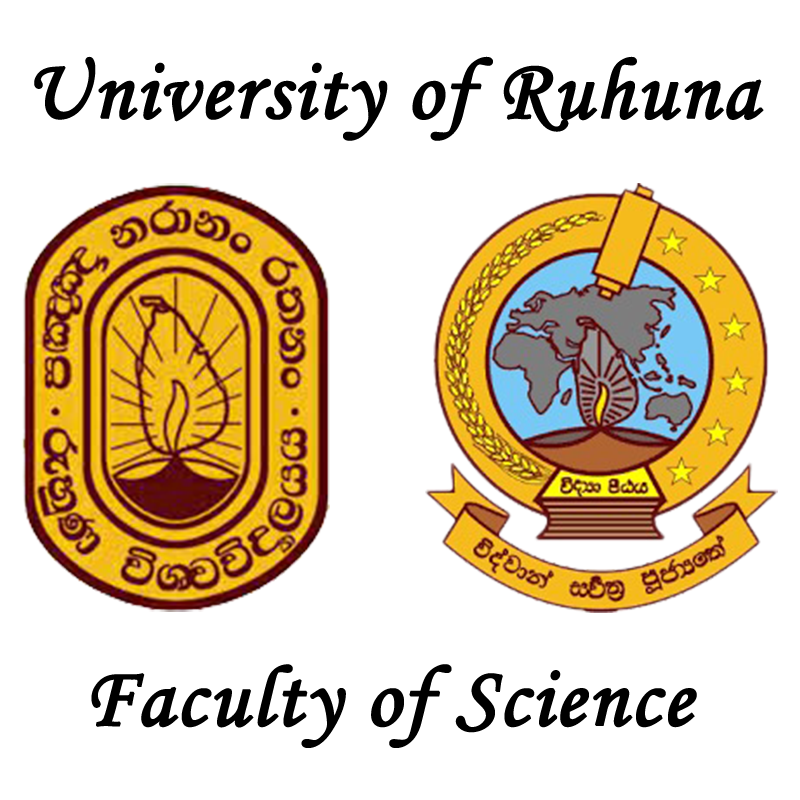
<style>
.page{position:relative;width:800px;height:800px;background:#ffffff}
.page>*{position:absolute;margin:0}
.t1{font:86.1px "MonotypeCorsiva";letter-spacing:0.01em;color:#000000;font-weight:bold}
</style>
<div class="page">
<p class="t1" style="left:34px;top:56px;width:730px;height:85px">University of Ruhuna</p>
<p class="t1" style="left:91px;top:664px;width:606px;height:84px">Faculty of Science</p>
</div>
